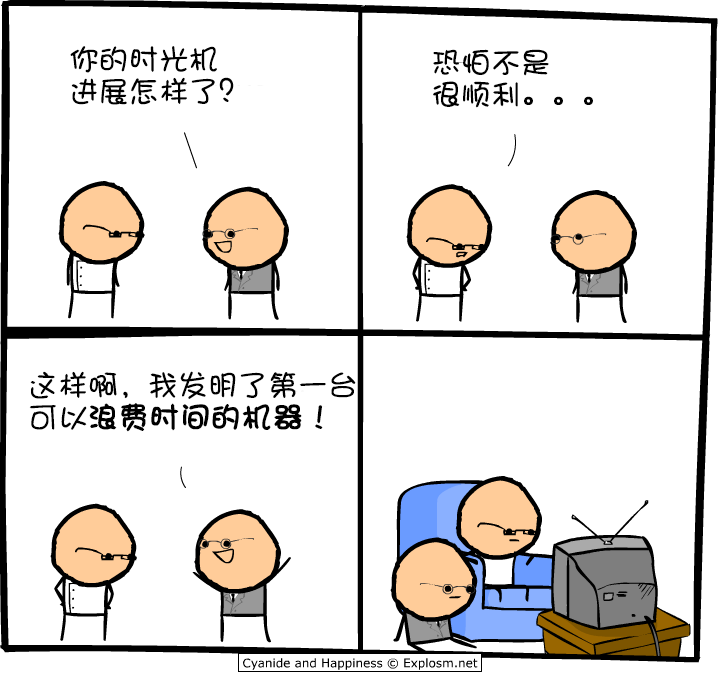
<style>
.page{position:relative;width:720px;height:675px;background:#ffffff}
.page>*{position:absolute;margin:0}
.t1{font:30px/32px "DFShaoNvW5";color:#000000}
.t2{font:30px/32px "DFShaoNvW5";color:#000000;font-weight:bold}
</style>
<div class="page">
<p class="t1" style="left:70px;top:46px;width:164px;height:59px">你的时光机<br>进展怎样了？</p>
<p class="t1" style="left:433px;top:49px;width:160px;height:59px">恐怕不是<br>很顺利。。。</p>
<p class="t1" style="left:29px;top:371px;width:327px;height:61px">这样啊，我发明了第一台<br>可以<span class="t2">浪费时间的机器</span>！</p>
</div>
